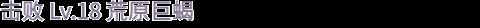
<style>
.page{position:relative;width:480px;height:28px;background:#000000}
.page>*{position:absolute;margin:0}
.t1{font:22px "WebPSD-18463539-0-Regular";color:#837a91;font-weight:bold}
</style>
<div class="page">
<p class="t1" style="left:0px;top:0px;width:480px;height:28px">击败 Lv.18 荒原巨蝎</p>
</div>
